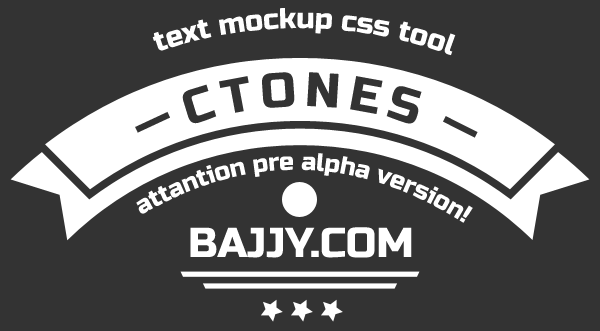
<style>
.page{position:relative;width:600px;height:331px;background:#333333}
.page>*{position:absolute;margin:0}
.t1{font:28.9px "RussoOne-Regular";color:#ffffff}
.t2{font:25px "RussoOne-Regular";color:#ffffff}
.t3{font:41.7px "RussoOne-Regular";color:#ffffff}
</style>
<div class="page">
<p class="t1" style="left:152px;top:8px;width:304px;height:48px">text mockup css tool</p>
<p class="t2" style="left:136px;top:153px;width:337px;height:70px;text-align:center">attantion pre alpha version!</p>
<p class="t3" style="left:190px;top:227px;width:222px;height:31px">BAJJY.COM</p>
</div>
